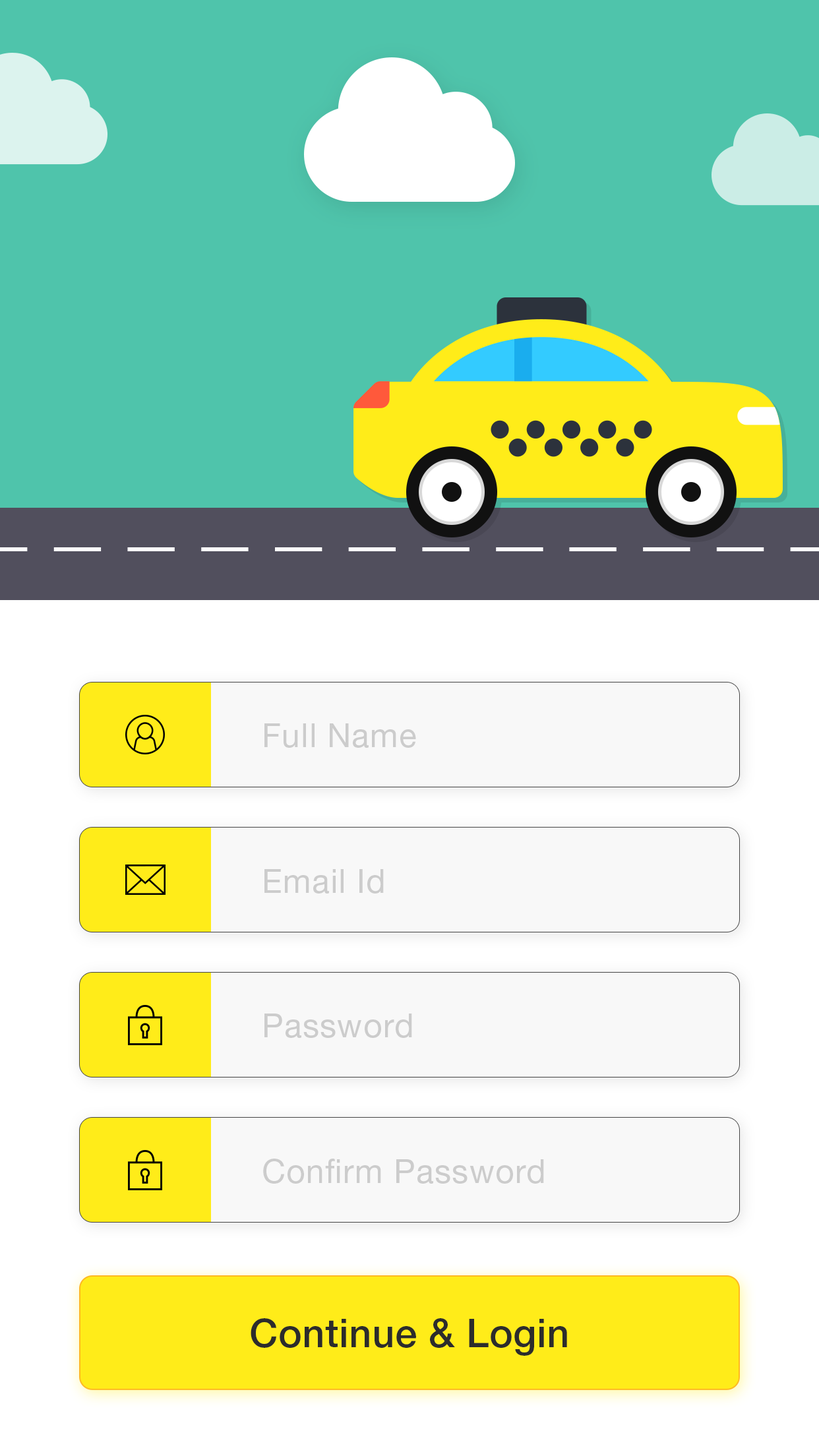
<style>
.page{position:relative;width:819px;height:1456px;background:#4fc4ab}
.page>*{position:absolute;margin:0}
.t1{font:33px "HelveticaNeueLTStd-Roman";letter-spacing:0.025em;color:#cccccc}
.t2{font:39.6px "HelveticaNeueLTStd-Md";letter-spacing:0.01em;color:#2c2c2c}
</style>
<div class="page">
<p class="t1" style="left:264px;top:723px;width:152px;height:25px">Full Name</p>
<p class="t1" style="left:264px;top:869px;width:120px;height:25px">Email Id</p>
<p class="t1" style="left:264px;top:1014px;width:148px;height:24px">Password</p>
<p class="t1" style="left:263px;top:1159px;width:281px;height:25px">Confirm Password</p>
<p class="t2" style="left:251px;top:1318px;width:316px;height:38px">Continue &amp; Login</p>
</div>
